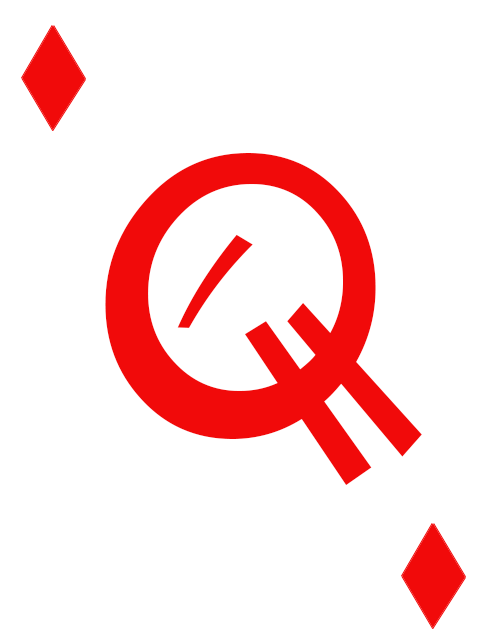
<style>
.page{position:relative;width:480px;height:640px;background:#ffffff}
.page>*{position:absolute;margin:0}
.t1{font:386.3px "Jokerman-Regular";color:#f10a0a}
</style>
<div class="page">
<p class="t1" style="left:105px;top:153px;width:317px;height:332px">Q</p>
</div>
